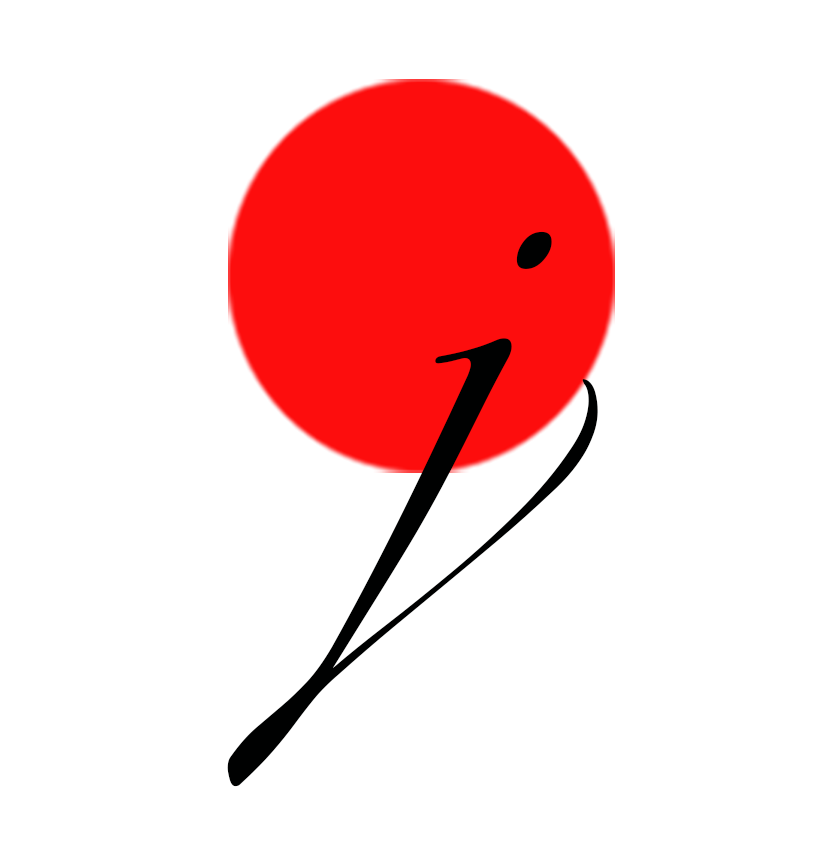
<style>
.page{position:relative;width:820px;height:858px;background:#ffffff}
.page>*{position:absolute;margin:0}
.t1{font:301.8px "Zapfino";letter-spacing:-0.015em;color:#000101}
</style>
<div class="page">
<p class="t1" style="left:227px;top:231px;width:371px;height:556px">j</p>
</div>
